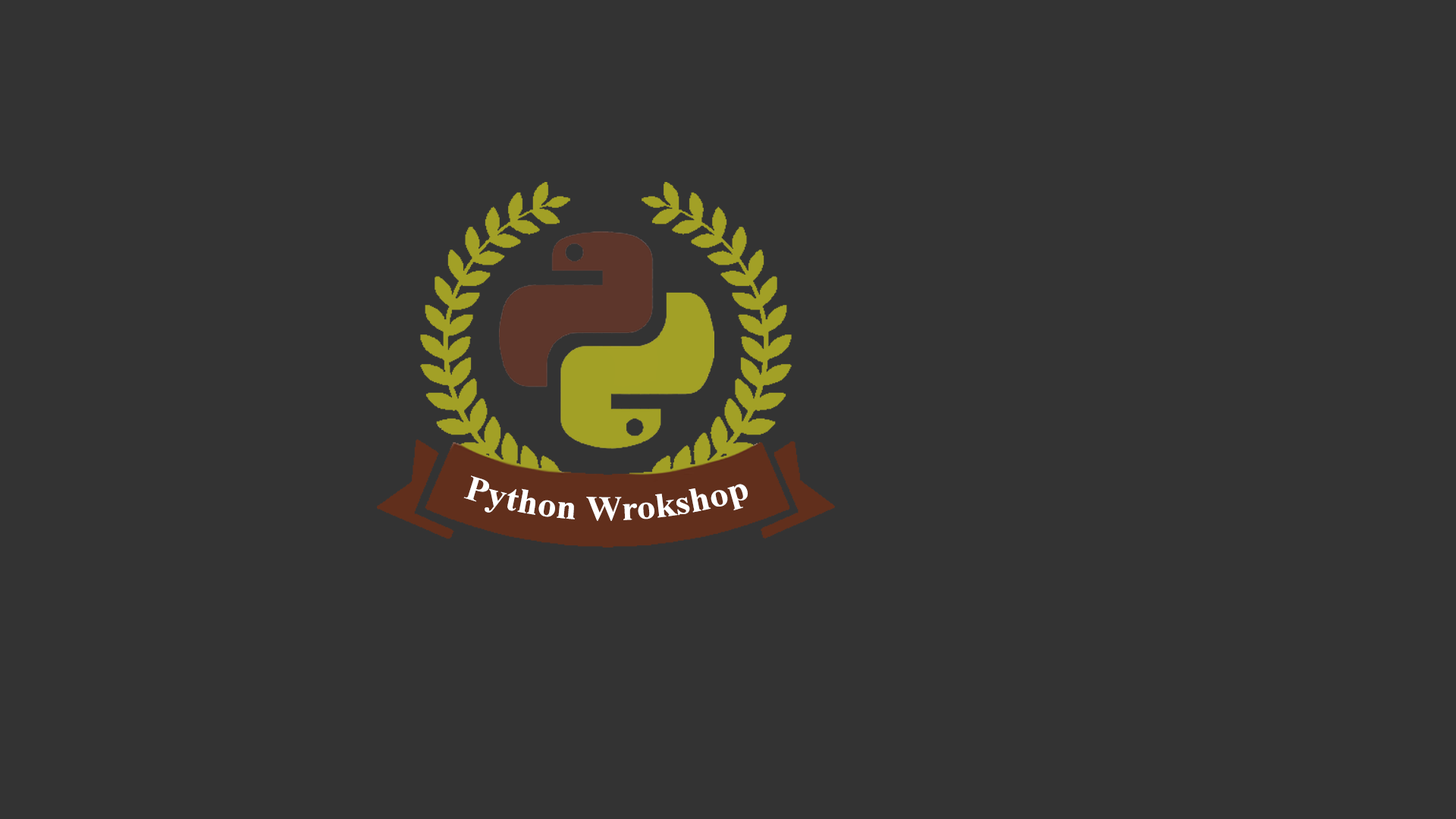
<style>
.page{position:relative;width:1456px;height:819px;background:#333333}
.page>*{position:absolute;margin:0}
.t1{font:34.8px "TimesNewRomanPS-BoldMT";color:#ffffff}
</style>
<div class="page">
<p class="t1" style="left:463px;top:475px;width:285px;height:46px">Python Wrokshop</p>
</div>
